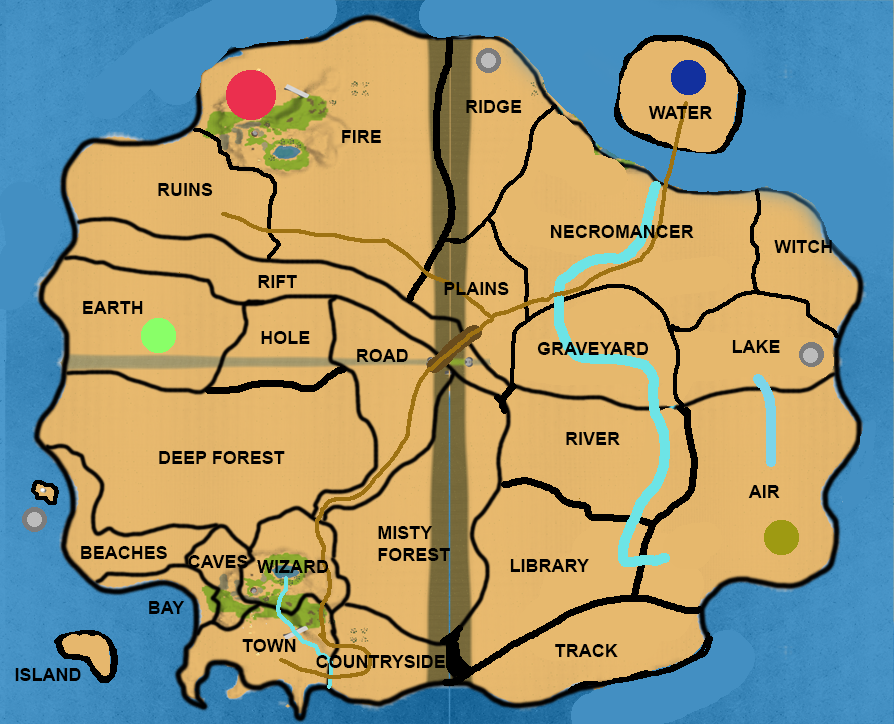
<style>
.page{position:relative;width:894px;height:724px}
.page>*{position:absolute;margin:0}
.t1{font:18px "Arial-BoldMT";color:#000000}
</style>
<div class="page">
<p class="t1" style="left:466px;top:100px;width:56px;height:13px">RIDGE</p>
<p class="t1" style="left:648px;top:106px;width:64px;height:13px">WATER</p>
<p class="t1" style="left:342px;top:130px;width:39px;height:13px">FIRE</p>
<p class="t1" style="left:158px;top:183px;width:55px;height:13px">RUINS</p>
<p class="t1" style="left:551px;top:225px;width:143px;height:13px">NECROMANCER</p>
<p class="t1" style="left:774px;top:240px;width:58px;height:13px">WITCH</p>
<p class="t1" style="left:258px;top:275px;width:39px;height:13px">RIFT</p>
<p class="t1" style="left:444px;top:282px;width:65px;height:13px">PLAINS</p>
<p class="t1" style="left:83px;top:301px;width:60px;height:13px">EARTH</p>
<p class="t1" style="left:261px;top:331px;width:49px;height:13px">HOLE</p>
<p class="t1" style="left:537px;top:342px;width:111px;height:13px">GRAVEYARD</p>
<p class="t1" style="left:732px;top:340px;width:48px;height:13px">LAKE</p>
<p class="t1" style="left:357px;top:349px;width:51px;height:13px">ROAD</p>
<p class="t1" style="left:566px;top:432px;width:54px;height:13px">RIVER</p>
<p class="t1" style="left:159px;top:451px;width:126px;height:13px">DEEP FOREST</p>
<p class="t1" style="left:748px;top:485px;width:32px;height:13px">AIR</p>
<p class="t1" style="left:378px;top:526px;width:72px;height:35px">MISTY<br>FOREST</p>
<p class="t1" style="left:81px;top:546px;width:86px;height:13px">BEACHES</p>
<p class="t1" style="left:188px;top:555px;width:60px;height:13px">CAVES</p>
<p class="t1" style="left:257px;top:560px;width:71px;height:13px">WIZARD</p>
<p class="t1" style="left:510px;top:559px;width:79px;height:13px">LIBRARY</p>
<p class="t1" style="left:149px;top:601px;width:36px;height:13px">BAY</p>
<p class="t1" style="left:242px;top:639px;width:54px;height:13px">TOWN</p>
<p class="t1" style="left:555px;top:644px;width:63px;height:13px">TRACK</p>
<p class="t1" style="left:316px;top:655px;width:129px;height:13px">COUNTRYSIDE</p>
<p class="t1" style="left:15px;top:668px;width:66px;height:13px">ISLAND</p>
</div>
